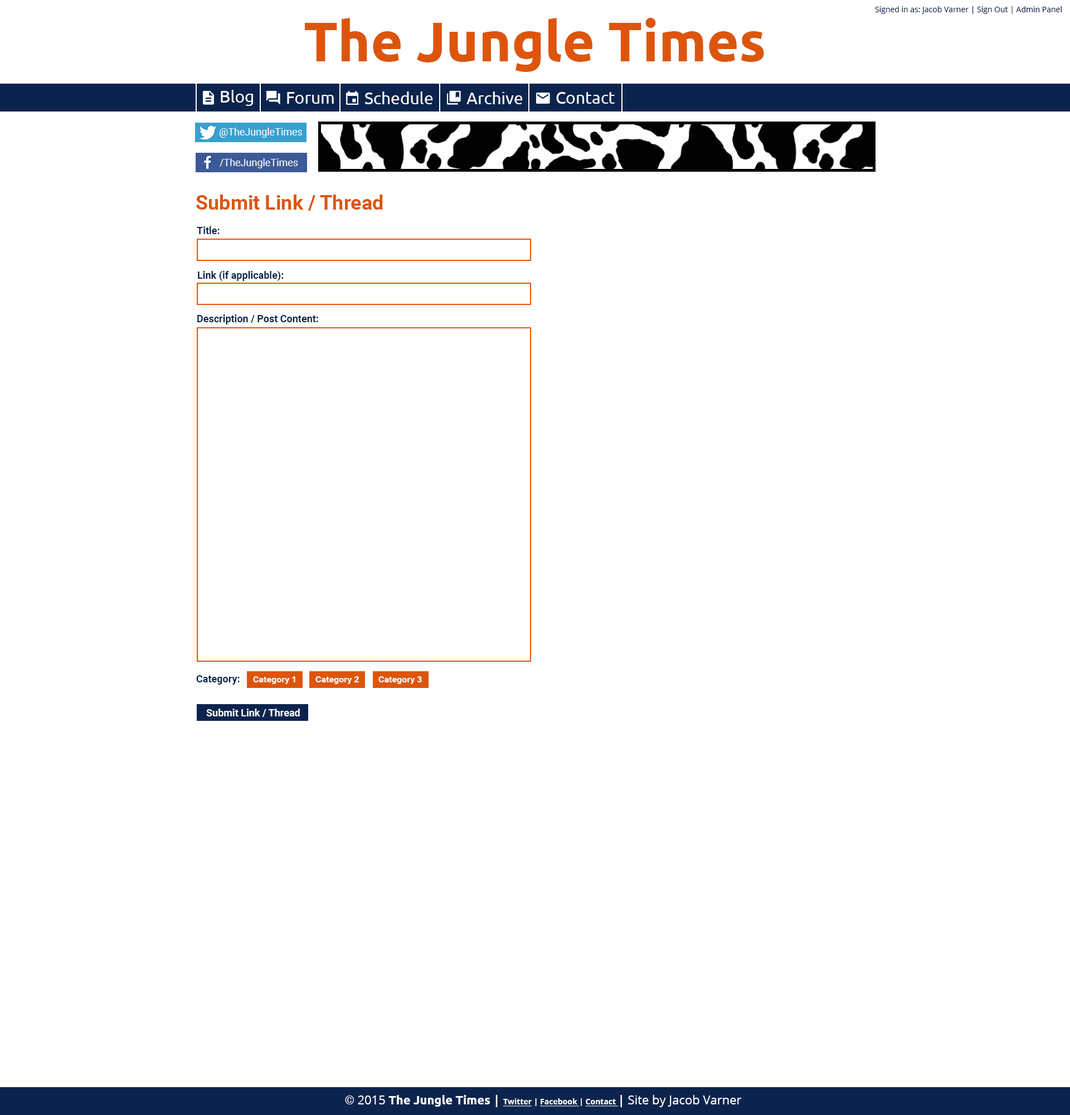
<style>
.page{position:relative;width:1070px;height:1115px;background:#ffffff}
.page>*{position:absolute;margin:0}
.t1{font:55.7px "Ubuntu-Bold";color:#dd550c}
.t2{font:7.8px "OpenSans";color:#0c244d}
.t3{font:16.7px "Ubuntu";color:#ffffff}
.t4{font:10px "Roboto-Regular";color:#ffffff}
.t5{font:20.1px "Roboto-Bold";color:#dd550c}
.t6{font:10px "Roboto-Bold";color:#03244d}
.t7{font:8.9px "Roboto-Bold";color:#ffffff}
.t8{font:10px "Roboto-Bold";color:#ffffff}
.t9{font:12.3px "OpenSans";color:#ffffff}
.t10{font:12.3px "Roboto-Bold";color:#ffffff}
.t11{font:12.3px "Ubuntu-Bold";color:#ffffff}
.t12{font:12.3px "OpenSans-Bold";color:#ffffff}
.t13{font:7.8px "OpenSans-Bold";color:#ffffff;text-decoration:underline}
.t14{font:7.8px "OpenSans-Bold";color:#ffffff}
</style>
<div class="page">
<p class="t1" style="left:305px;top:18px;width:459px;height:54px">The Jungle Times</p>
<p class="t2" style="left:875px;top:6px;width:187px;height:8px">Signed in as: Jacob Varner | Sign Out | Admin Panel</p>
<p class="t3" style="left:221px;top:90px;width:32px;height:16px">Blog</p>
<p class="t3" style="left:287px;top:92px;width:47px;height:12px">Forum</p>
<p class="t3" style="left:365px;top:91px;width:68px;height:13px">Schedule</p>
<p class="t3" style="left:466px;top:91px;width:57px;height:13px">Archive</p>
<p class="t3" style="left:556px;top:92px;width:59px;height:12px">Contact</p>
<p class="t4" style="left:219px;top:128px;width:83px;height:10px">@TheJungleTimes</p>
<p class="t4" style="left:220px;top:158px;width:78px;height:10px">/TheJungleTimes</p>
<p class="t5" style="left:196px;top:194px;width:187px;height:17px">Submit Link / Thread</p>
<p class="t6" style="left:197px;top:226px;width:23px;height:8px">Title:</p>
<p class="t6" style="left:198px;top:271px;width:86px;height:10px">Link (if applicable):</p>
<p class="t6" style="left:197px;top:314px;width:121px;height:10px">Description / Post Content:</p>
<p class="t6" style="left:196px;top:675px;width:44px;height:9px">Category:</p>
<p class="t7" style="left:253px;top:676px;width:42px;height:8px">Category 1</p>
<p class="t7" style="left:315px;top:676px;width:44px;height:8px">Category 2</p>
<p class="t7" style="left:378px;top:676px;width:44px;height:8px">Category 3</p>
<p class="t8" style="left:206px;top:708px;width:94px;height:9px">Submit Link / Thread</p>
<p class="t9" style="left:345px;top:1094px;width:397px;height:13px"><span class="t10">© </span>2015 <span class="t11">The Jungle Times </span><span class="t12">| </span><span class="t13">Twitter</span><span class="t14"> | </span><span class="t13">Facebook </span><span class="t14">| </span><span class="t13">Contact </span><span class="t12">| </span>Site by Jacob Varner</p>
</div>
